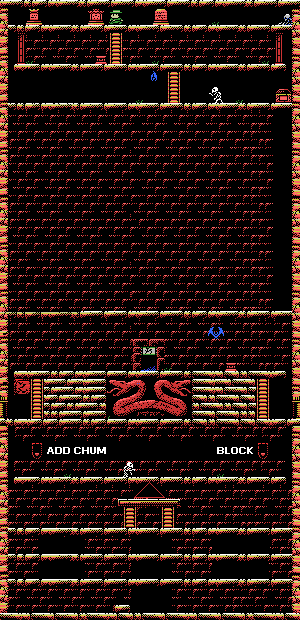
<style>
.page{position:relative;width:300px;height:620px;background:#000000}
.page>*{position:absolute;margin:0}
.t1{font:9.2px "Small Fonts";color:#ffffff;font-weight:bold}
</style>
<div class="page">
<p class="t1" style="left:47px;top:447px;width:59px;height:7px">ADD CHUM</p>
<p class="t1" style="left:217px;top:447px;width:36px;height:7px">BLOCK</p>
</div>
